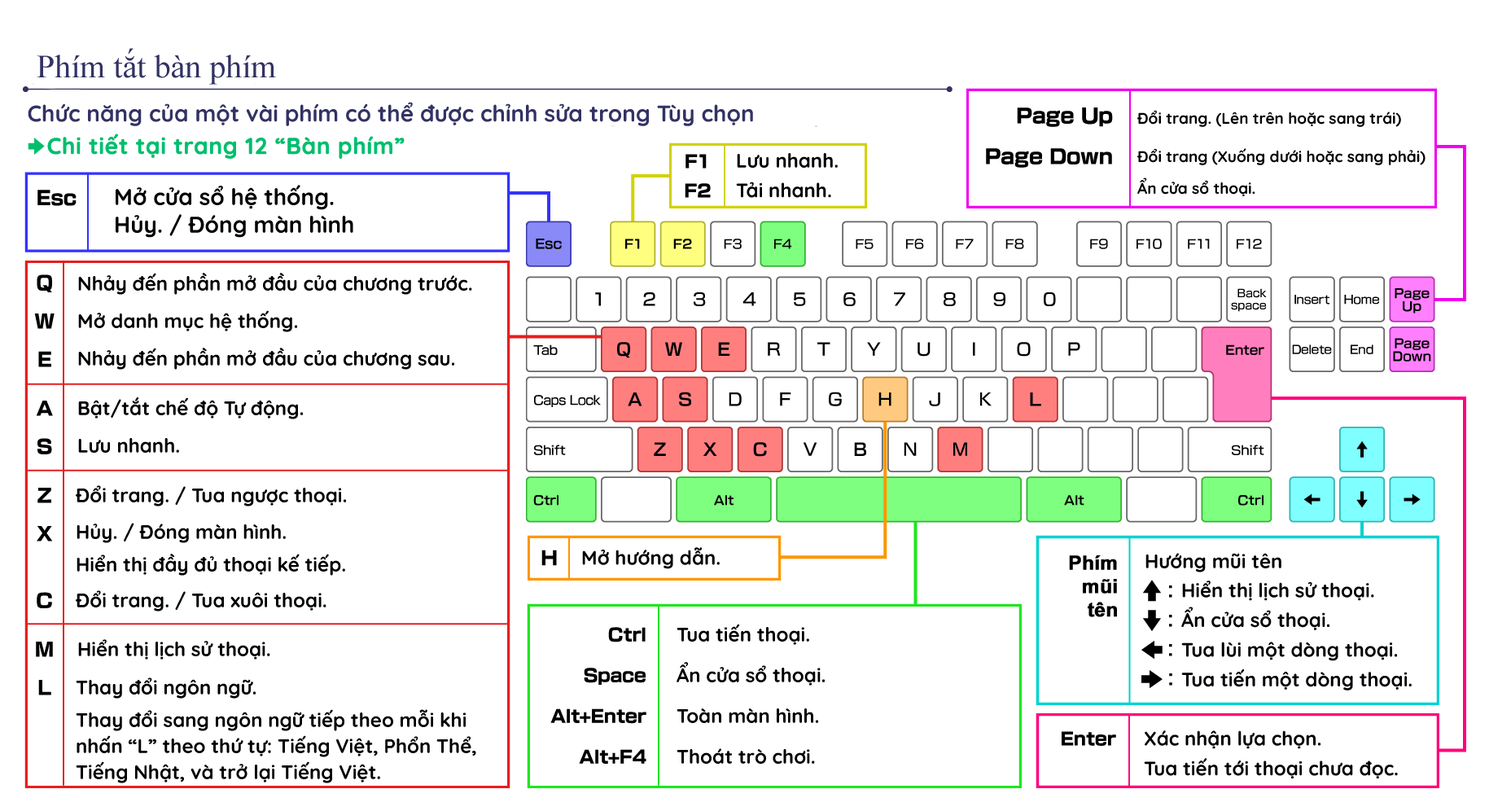
<style>
.page{position:relative;width:1511px;height:789px;background:#ffffff}
.page>*{position:absolute;margin:0}
.t1{font:32.6px "TimesNewRomanPSMT";color:#323264}
.t2{font:22.8px "Quicksand-Bold";color:#323264}
.t3{font:15.5px/31.8px "Quicksand-Bold";color:#000000}
.t4{font:22.8px "Quicksand-Bold";color:#00be6e;font-weight:bold}
.t5{font:19.5px/23.2px "Quicksand-Bold";color:#000000}
.t6{font:22.8px/21.2px "Quicksand-Bold";color:#000000}
.t7{font:19.5px/30.9px "Quicksand-Bold";color:#000000}
.t8{font:19.5px "Quicksand-Bold";color:#000000}
.t9{font:19.5px/26.1px "Quicksand-Bold";color:#000000}
.t10{font:19.5px/22px "Quicksand-Bold";color:#000000}
.t11{font:19.5px "Arial-BoldMT";color:#000000;font-weight:bold}
.t12{font:19.5px/34.2px "Quicksand-Bold";color:#000000}
</style>
<div class="page">
<p class="t1" style="left:37px;top:48px;width:239px;height:37px">Phím tắt bàn phím</p>
<p class="t2" style="left:28px;top:102px;width:725px;height:24px">Chức năng của một vài phím có thể được chỉnh sửa trong Tùy chọn</p>
<p class="t3" style="left:1138px;top:110px;width:288px;height:86px">Đổi trang. (Lên trên hoặc sang trái)<br>Đổi trang (Xuống dưới hoặc sang phải)<br>Ẩn cửa sổ thoại.</p>
<p class="t4" style="left:47px;top:134px;width:358px;height:25px">Chi tiết tại trang 12 “Bàn phím”</p>
<p class="t5" style="left:736px;top:153px;width:102px;height:45px">Lưu nhanh.<br>Tải nhanh.</p>
<p class="t6" style="left:116px;top:185px;width:237px;height:53px">Mở cửa sổ hệ thống.<br>Hủy. / Đóng màn hình</p>
<p class="t7" style="left:78px;top:273px;width:394px;height:97px">Nhảy đến phần mở đầu của chương trước.<br>Mở danh mục hệ thống.<br>Nhảy đến phần mở đầu của chương sau.</p>
<p class="t7" style="left:78px;top:397px;width:225px;height:56px">Bật/tắt chế độ Tự động.<br>Lưu nhanh.</p>
<p class="t8" style="left:76px;top:485px;width:270px;height:21px">Đổi trang. / Tua ngược thoại.</p>
<p class="t9" style="left:77px;top:523px;width:268px;height:53px"><span class="t7">Hủy. / </span>Đóng màn hình.<br>Hiển thị<span class="t10"> đầy đủ thoại kế tiếp.</span></p>
<p class="t8" style="left:582px;top:547px;width:138px;height:22px">Mở hướng dẫn.</p>
<p class="t11" style="left:1069px;top:555px;width:48px;height:62px;text-align:right">Phím mũi <br>tên</p>
<p class="t8" style="left:1146px;top:553px;width:136px;height:19px">Hướng mũi tên</p>
<p class="t5" style="left:1181px;top:581px;width:231px;height:109px">Hiển thị lịch sử thoại.<br>Ẩn cửa sổ thoại.<br>Tua lùi một dòng thoại.<br>Tua tiến một dòng thoại.</p>
<p class="t8" style="left:76px;top:590px;width:251px;height:22px">Đổi trang. / Tua xuôi thoại.</p>
<p class="t12" style="left:677px;top:624px;width:148px;height:140px">Tua tiến thoại.<br>Ẩn cửa sổ thoại.<br>Toàn màn hình.<br>Thoát trò chơi.</p>
<p class="t8" style="left:78px;top:639px;width:192px;height:21px">Hiển thị lịch sử thoại.</p>
<p class="t9" style="left:76px;top:677px;width:400px;height:106px">Thay đổi ngôn ngữ.<br>Thay đổi sang ngôn ngữ tiếp theo mỗi khi nhấn “L” theo thứ tự: Tiếng Việt, Phổn Thể, Tiếng Nhật, và trở lại Tiếng Việt.</p>
<p class="t8" style="left:1144px;top:730px;width:254px;height:48px">Xác nhận lựa chọn.<br>Tua tiến tới thoại chưa đọc.</p>
</div>
